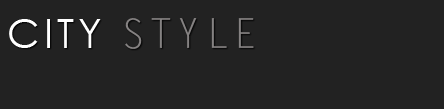
<style>
.page{position:relative;width:444px;height:109px;background:#222222}
.page>*{position:absolute;margin:0}
.t1{font:40px "LetterGothicStd";letter-spacing:0.1em;color:#858282}
.t2{font:40px "CenturyGothic";letter-spacing:0.1em;color:#ffffff}
</style>
<div class="page">
<p class="t1" style="left:9px;top:18px;width:245px;height:31px"><span class="t2">CITY </span>STYLE</p>
</div>
